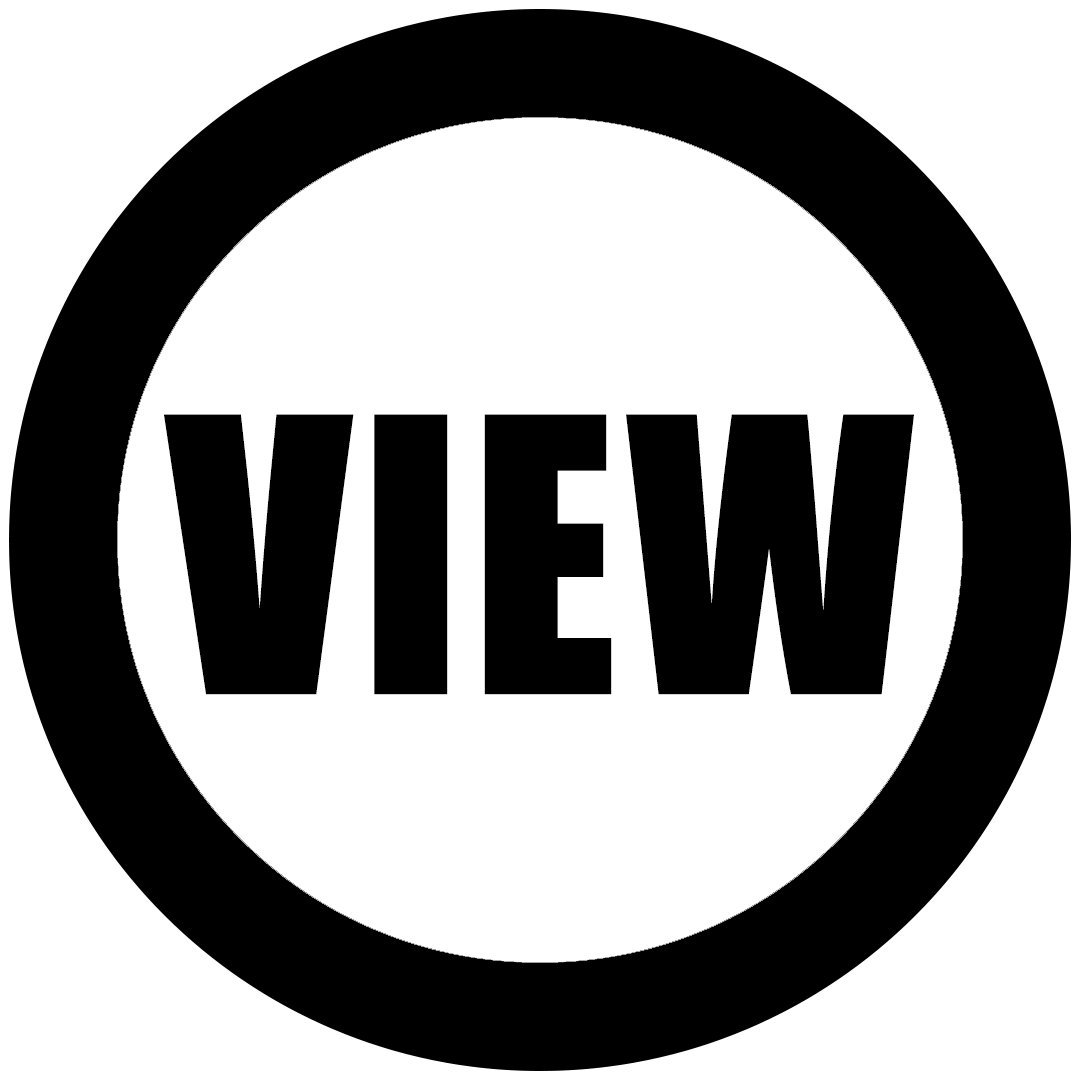
<style>
.page{position:relative;width:1080px;height:1080px;background:#ffffff}
.page>*{position:absolute;margin:0}
.t1{font:353.4px "Impact";letter-spacing:0.025em;color:#000000}
</style>
<div class="page">
<p class="t1" style="left:164px;top:414px;width:750px;height:281px">VIEW</p>
</div>
